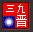
<style>
.page{position:relative;width:33px;height:32px;background:#f20000}
.page>*{position:absolute;margin:0}
.t1{font:10.4px "SimSun";color:#ffffff}
.t2{font:11.7px "SimSun";color:#ffffff}
</style>
<div class="page">
<p class="t1" style="left:6px;top:4px;width:19px;height:9px">三九</p>
<p class="t2" style="left:16px;top:15px;width:11px;height:12px">晋</p>
</div>
